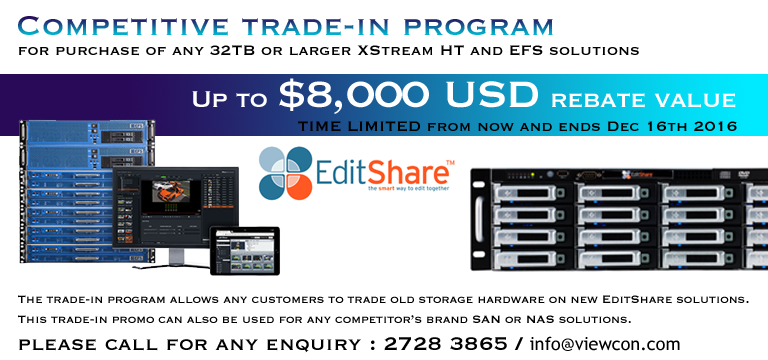
<style>
.page{position:relative;width:768px;height:360px;background:#ffffff}
.page>*{position:absolute;margin:0}
.t1{font:36px "Copperplate"}
.t2{font:18px "Copperplate";color:#000000}
.t3{font:30px "Copperplate";letter-spacing:-0.03em;color:#ffffff}
.t4{font:48px "Copperplate";letter-spacing:-0.03em;color:#ffffff}
.t5{font:14px/10px "Copperplate";letter-spacing:-0.015em;color:#000000}
.t6{font:24px "Copperplate";color:#000000}
.t7{font:18px "TrebuchetMS";color:#000000}
</style>
<div class="page">
<p class="t1" style="left:18px;top:16px;width:535px;height:20px">Competitive trade-in program</p>
<p class="t2" style="left:18px;top:45px;width:621px;height:11px">for purchase of any 32TB or larger XStream HT and EFS solutions</p>
<p class="t3" style="left:192px;top:78px;width:544px;height:36px">Up to <span class="t4">$8,000 USD </span>rebate value</p>
<p class="t2" style="left:298px;top:121px;width:439px;height:11px">TIME LIMITED from now and ends Dec 16th 2016</p>
<p class="t5" style="left:18px;top:295px;width:731px;height:29px">The trade-in program allows any customers to trade old storage hardware on new EditShare solutions. <br><br>This trade-in promo can also be used for any competitor’s brand SAN or NAS solutions.</p>
<p class="t6" style="left:19px;top:336px;width:661px;height:17px">please call for any enquiry : 2728 3865 / <span class="t7">info@viewcon.com</span></p>
</div>
